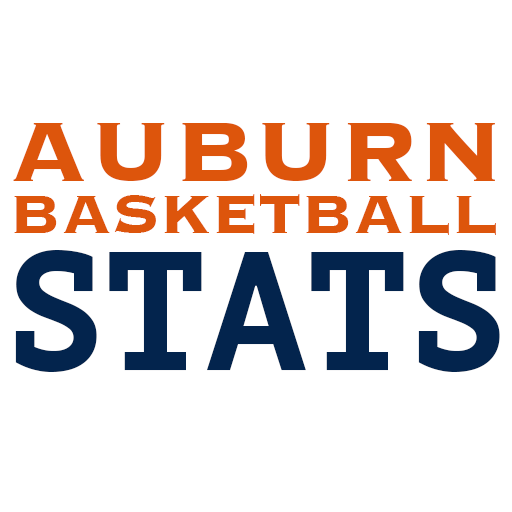
<style>
.page{position:relative;width:512px;height:512px;background:#ffffff}
.page>*{position:absolute;margin:0}
.t1{font:110px "Copperplate-Bold";color:#dd550c}
.t2{font:71px "Copperplate-Bold";color:#dd550c}
.t3{font:168px "PTMono-Bold";color:#03244d}
</style>
<div class="page">
<p class="t1" style="left:13px;top:123px;width:482px;height:58px">AUBURN</p>
<p class="t2" style="left:14px;top:194px;width:482px;height:41px">BASKETBALL</p>
<p class="t3" style="left:15px;top:250px;width:485px;height:122px">STATS</p>
</div>
